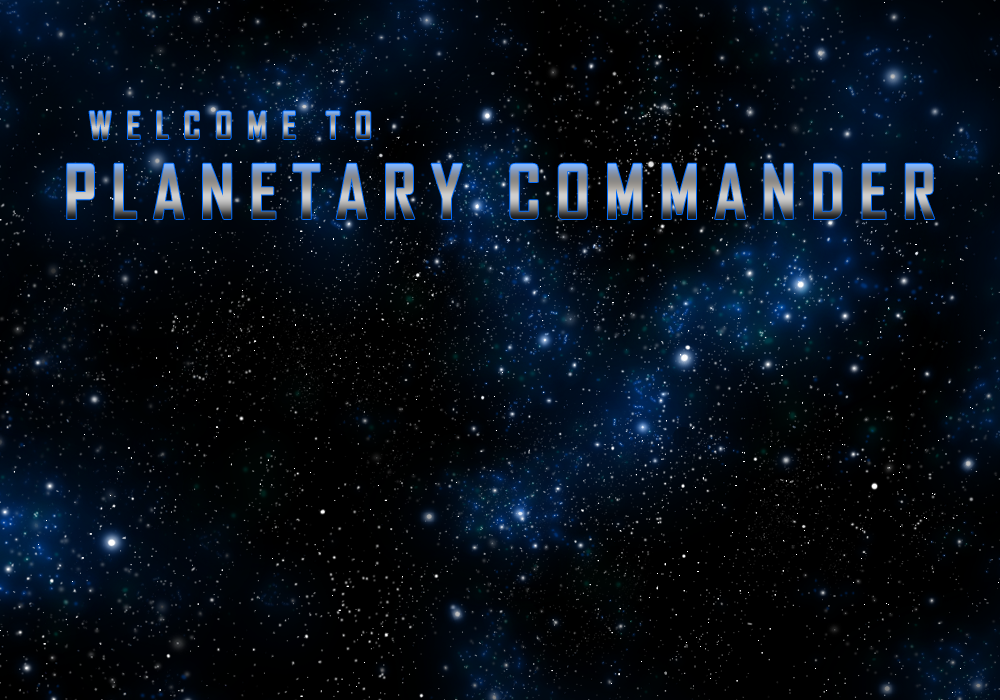
<style>
.page{position:relative;width:1000px;height:700px}
.page>*{position:absolute;margin:0}
.t1{font:36px "AgencyFB-Bold"}
.t2{font:72px "AgencyFB-Bold"}
</style>
<div class="page">
<p class="t1" style="left:89px;top:111px;width:282px;height:29px">W  E  L  C  O  M  E    T  O</p>
<p class="t2" style="left:67px;top:163px;width:868px;height:56px">P L A N E T A R Y   C O M M A N D E R</p>
</div>
